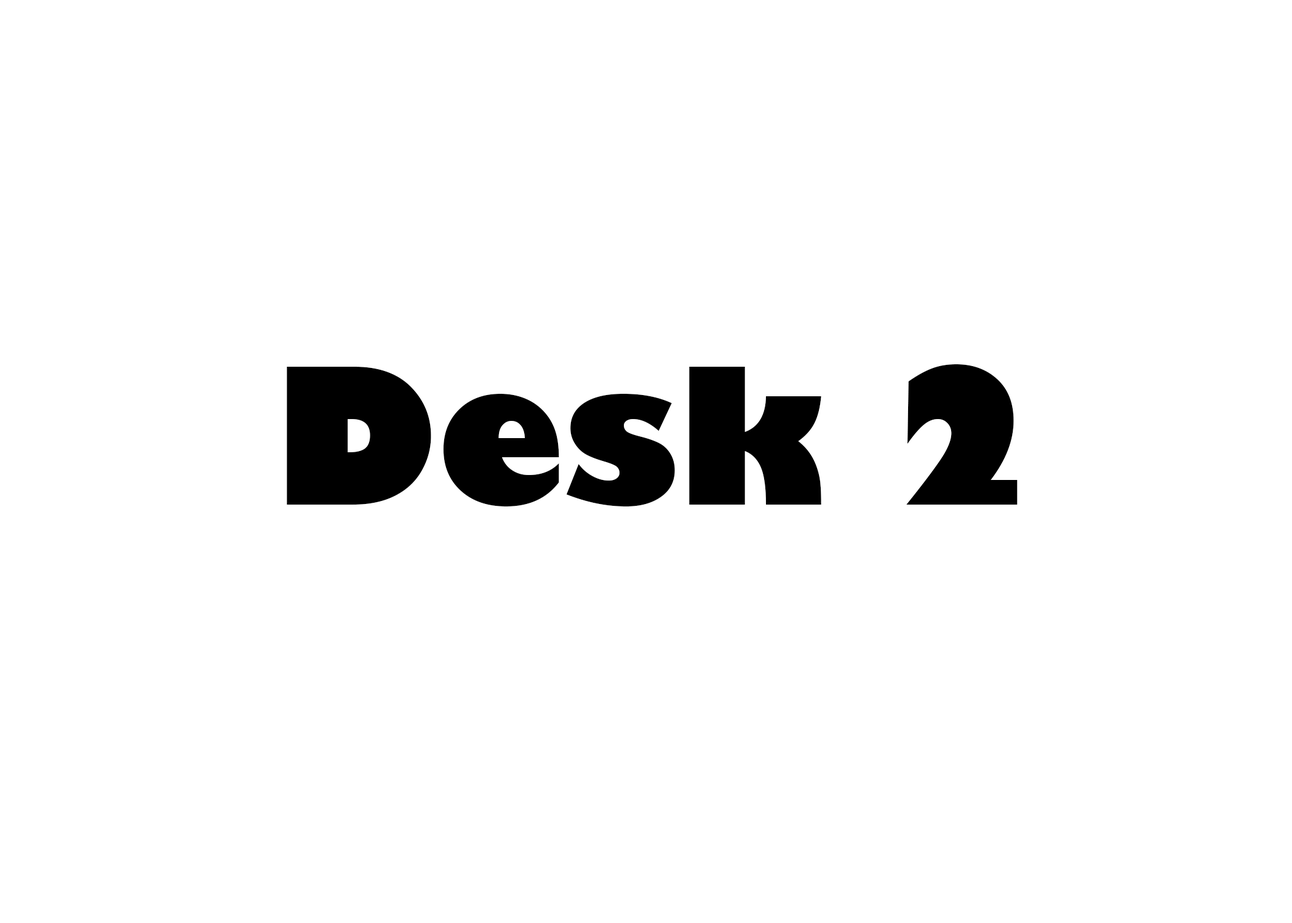
<style>
.page{position:relative;width:1292px;height:923px;background:#ffffff}
.page>*{position:absolute;margin:0}
.t1{font:184.6px "GillSans-UltraBold";color:#000000}
</style>
<div class="page">
<p class="t1" style="left:287px;top:364px;width:731px;height:142px">Desk 2</p>
</div>
